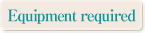
<style>
.page{position:relative;width:145px;height:33px;background:#f4e9e1}
.page>*{position:absolute;margin:0}
.t1{font:16px "RyuminPro-ExBold";letter-spacing:-0.08em;color:#019a9f}
</style>
<div class="page">
<p class="t1" style="left:7px;top:9px;width:129px;height:15px">Equipment required</p>
</div>
